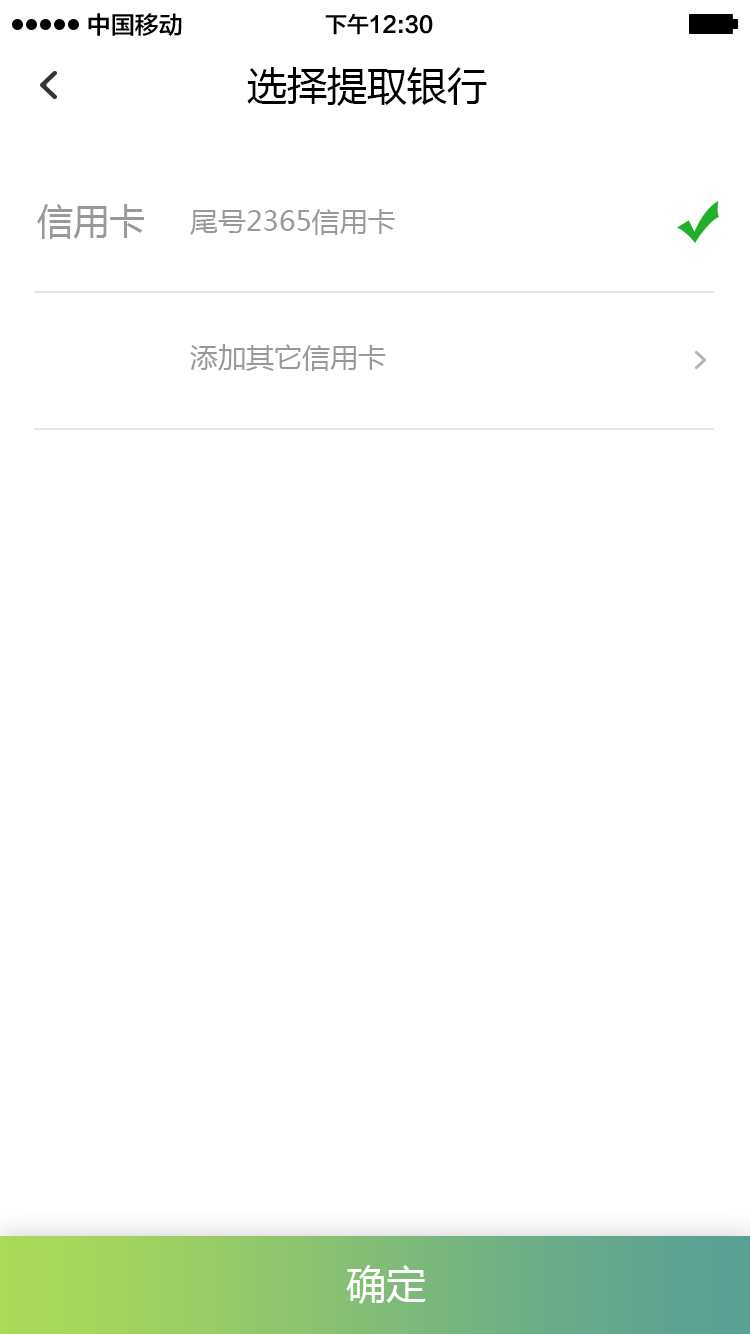
<style>
.page{position:relative;width:750px;height:1334px;background:#ffffff}
.page>*{position:absolute;margin:0}
.t1{font:24px "FZLTZHK--GBK1-0";color:#000000}
.t2{font:22px "FZLTZHK--GBK1-0";color:#000000}
.t3{font:40px "MicrosoftYaHei";color:#000000}
.t4{font:36px "MicrosoftYaHei";color:#999999}
.t5{font:28px "MicrosoftYaHei";color:#999999}
.t6{font:40px "MicrosoftYaHei";color:#ffffff}
</style>
<div class="page">
<p class="t1" style="left:88px;top:13px;width:94px;height:23px">中国移动</p>
<p class="t2" style="left:325px;top:14px;width:108px;height:21px">下午12:30</p>
<p class="t3" style="left:247px;top:67px;width:240px;height:39px">选择提取银行</p>
<p class="t4" style="left:37px;top:204px;width:107px;height:35px">信用卡</p>
<p class="t5" style="left:190px;top:209px;width:205px;height:26px">尾号2365信用卡</p>
<p class="t5" style="left:190px;top:344px;width:196px;height:27px">添加其它信用卡</p>
<p class="t6" style="left:346px;top:1265px;width:80px;height:39px">确定</p>
</div>
